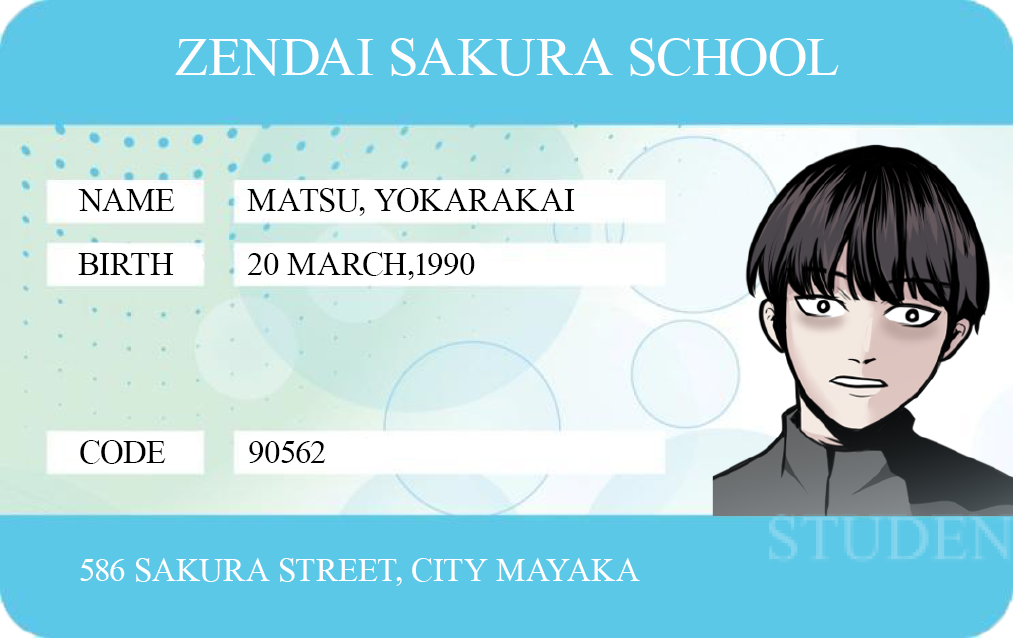
<style>
.page{position:relative;width:1013px;height:638px;background:#5cc8e7}
.page>*{position:absolute;margin:0}
.t1{font:83.3px "AngsanaNew";color:#fefefe;text-transform:uppercase}
.t2{font:50px "AngsanaNew";color:#000000;text-transform:uppercase}
.t3{font:50px "AngsanaNew";color:#ffffff;text-transform:uppercase}
</style>
<div class="page">
<p class="t1" style="left:175px;top:38px;width:664px;height:38px">zendai sakura school</p>
<p class="t2" style="left:78px;top:188px;width:97px;height:24px">name</p>
<p class="t2" style="left:247px;top:188px;width:328px;height:28px">matsu, yokarakai</p>
<p class="t2" style="left:78px;top:253px;width:96px;height:22px">birth</p>
<p class="t2" style="left:247px;top:252px;width:228px;height:28px">20 march,1990</p>
<p class="t2" style="left:80px;top:440px;width:86px;height:24px">code</p>
<p class="t2" style="left:249px;top:441px;width:76px;height:22px">90562</p>
<p class="t3" style="left:80px;top:558px;width:560px;height:28px">586 sakura street, city mayaka</p>
</div>
